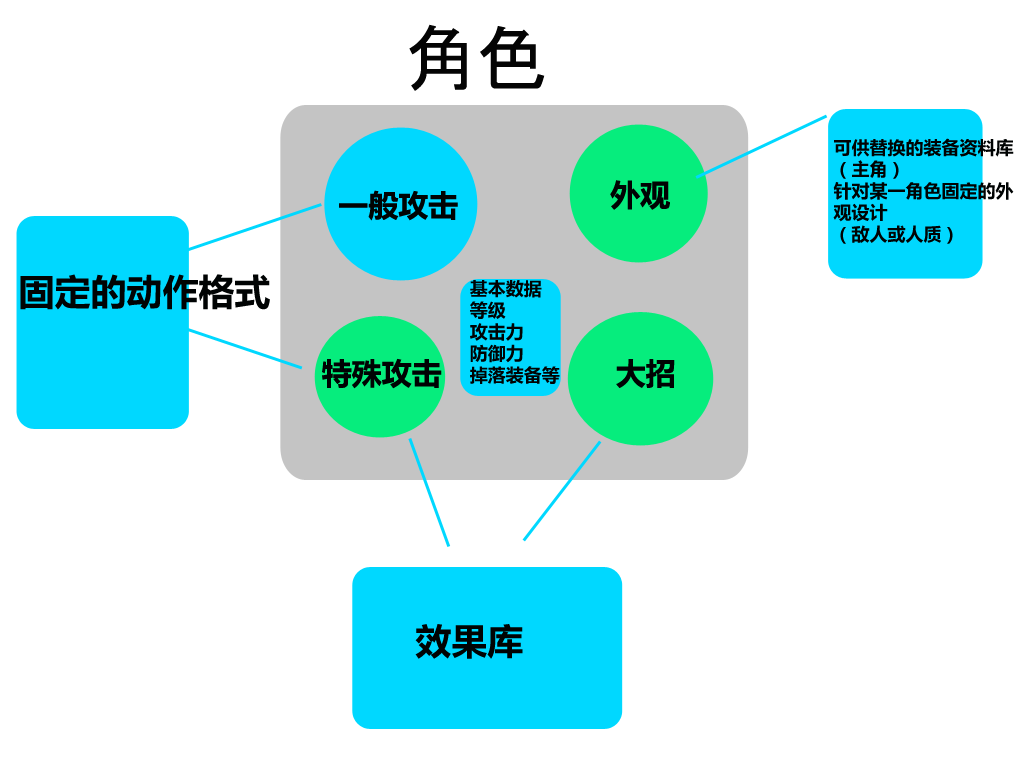
<style>
.page{position:relative;width:1024px;height:768px;background:#ffffff}
.page>*{position:absolute;margin:0}
.t1{font:72px "MS-UIGothic";color:#040404}
.t2{font:18px "MicrosoftYaHei";color:#000303}
.t3{font:30px "MicrosoftYaHei";color:#000303}
.t4{font:36px "MicrosoftYaHei";color:#000303}
</style>
<div class="page">
<p class="t1" style="left:409px;top:24px;width:136px;height:67px">角色</p>
<p class="t2" style="left:833px;top:138px;width:181px;height:106px">可供替换的装备资料库<br>（主角）<br>针对某一角色固定的外<br>观设计<br>（敌人或人质）</p>
<p class="t3" style="left:610px;top:180px;width:60px;height:30px">外观</p>
<p class="t3" style="left:339px;top:190px;width:119px;height:31px">一般攻击</p>
<p class="t4" style="left:20px;top:274px;width:250px;height:36px">固定的动作格式</p>
<p class="t2" style="left:470px;top:280px;width:90px;height:104px">基本数据<br>等级<br>攻击力<br>防御力<br>掉落装备等</p>
<p class="t3" style="left:322px;top:358px;width:120px;height:31px">特殊攻击</p>
<p class="t3" style="left:616px;top:359px;width:59px;height:29px">大招</p>
<p class="t4" style="left:415px;top:624px;width:108px;height:35px">效果库</p>
</div>
